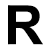
<style>
.page{position:relative;width:48px;height:48px;background:#ffffff}
.page>*{position:absolute;margin:0}
.t1{font:54.2px "Arial-BoldMT";color:#000000}
</style>
<div class="page">
<p class="t1" style="left:8px;top:5px;width:35px;height:40px">R</p>
</div>
